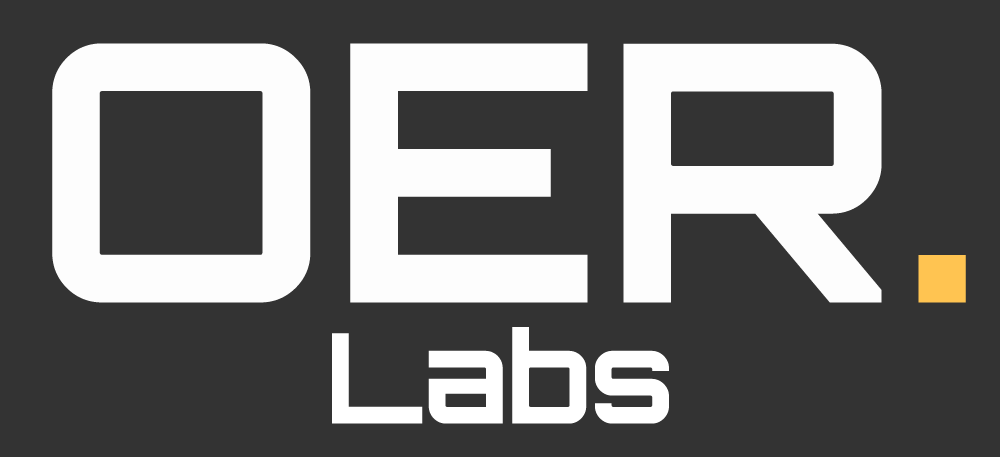
<style>
.page{position:relative;width:1000px;height:457px;background:#333333}
.page>*{position:absolute;margin:0}
.t1{font:359.5px "Orbitron-Bold";color:#fdfdfd}
.t2{font:359.5px "Orbitron-Bold";color:#ffc451}
.t3{font:125px "Orbitron-Bold";color:#ffffff}
</style>
<div class="page">
<p class="t1" style="left:52px;top:43px;width:914px;height:260px">OER<span class="t2">.</span></p>
<p class="t3" style="left:332px;top:327px;width:337px;height:97px">Labs</p>
</div>
